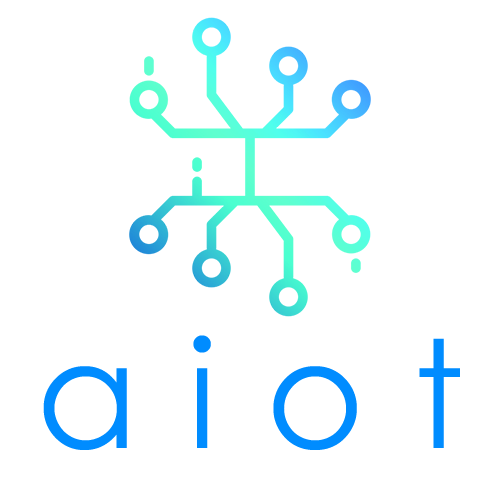
<style>
.page{position:relative;width:500px;height:500px;background:#ffffff}
.page>*{position:absolute;margin:0}
.t1{font:150px "CenturyGothic";letter-spacing:0.025em;color:#008cff}
</style>
<div class="page">
<p class="t1" style="left:43px;top:335px;width:417px;height:115px">a i o t</p>
</div>
